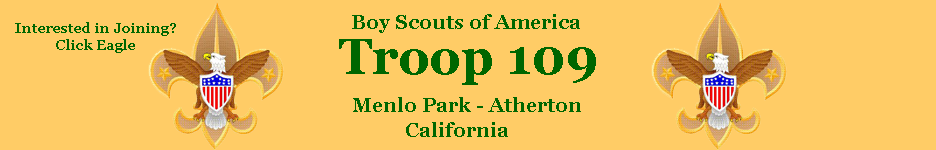
<style>
.page{position:relative;width:936px;height:150px;background:#ffcc66}
.page>*{position:absolute;margin:0}
.t1{font:19.9px "Georgia-Bold";color:#006600}
.t2{font:13.9px "Georgia-Bold";color:#006600}
.t3{font:49.8px "Georgia-Bold";color:#006600}
</style>
<div class="page">
<p class="t1" style="left:352px;top:14px;width:228px;height:19px">Boy Scouts of America</p>
<p class="t2" style="left:15px;top:22px;width:161px;height:31px;text-align:center">Interested in Joining?<br>Click Eagle</p>
<p class="t3" style="left:339px;top:39px;width:257px;height:46px">Troop 109</p>
<p class="t1" style="left:353px;top:97px;width:228px;height:15px">Menlo Park - Atherton</p>
<p class="t1" style="left:406px;top:122px;width:102px;height:15px">California</p>
</div>
